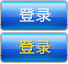
<style>
.page{position:relative;width:68px;height:64px}
.page>*{position:absolute;margin:0}
.t1{font:15px "MicrosoftYaHei";color:#f9fafc;text-transform:uppercase}
.t2{font:15px "MicrosoftYaHei";color:#ffe300;text-transform:uppercase}
</style>
<div class="page">
<p class="t1" style="left:19px;top:7px;width:32px;height:15px">登录</p>
<p class="t2" style="left:19px;top:39px;width:32px;height:15px">登录</p>
</div>
